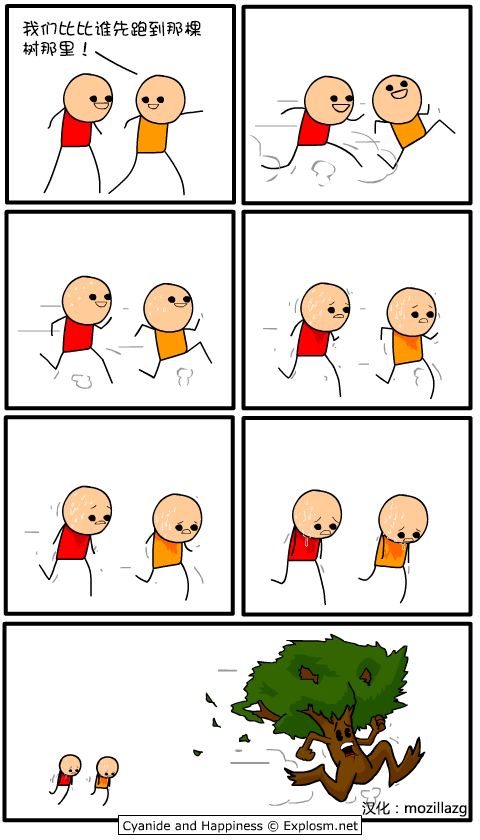
<style>
.page{position:relative;width:480px;height:840px;background:#ffffff}
.page>*{position:absolute;margin:0}
.t1{font:18px/20px "DFGirl";color:#000000}
.t2{font:14px "MicrosoftYaHei";color:#000000}
</style>
<div class="page">
<p class="t1" style="left:22px;top:20px;width:180px;height:37px">我们比比谁先跑到那棵<br>树那里！</p>
<p class="t2" style="left:362px;top:801px;width:105px;height:16px">汉化：mozillazg</p>
</div>
